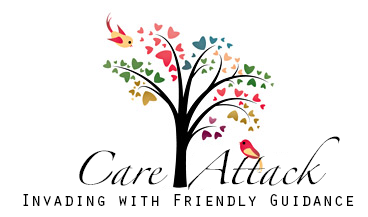
<style>
.page{position:relative;width:368px;height:217px;background:#ffffff}
.page>*{position:absolute;margin:0}
.t1{font:30px "Zapfino";color:#000000}
.t2{font:18px "OratorStd";color:#000000}
</style>
<div class="page">
<p class="t1" style="left:188px;top:136px;width:152px;height:54px">Attack</p>
<p class="t1" style="left:79px;top:150px;width:89px;height:36px">Care</p>
<p class="t2" style="left:23px;top:194px;width:331px;height:12px">Invading with Friendly Guidance</p>
</div>
